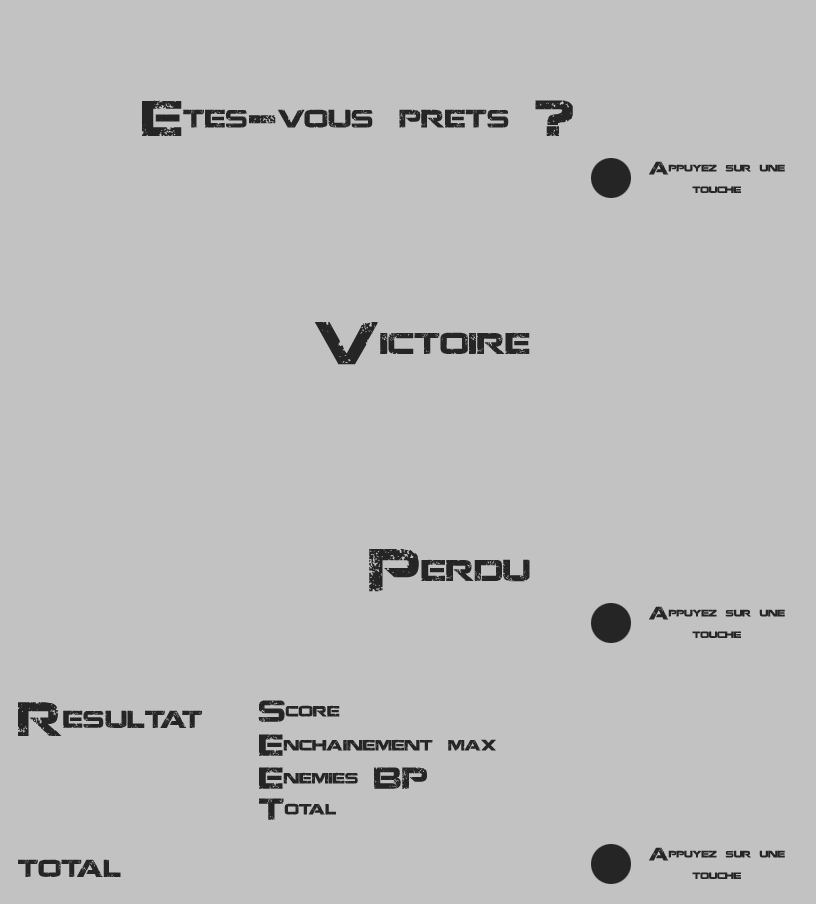
<style>
.page{position:relative;width:816px;height:904px;background:#c2c2c2}
.page>*{position:absolute;margin:0}
.t1{font:50px "JacintoSans";color:#252525}
.t2{font:18px "JacintoSans";color:#252525}
.t3{font:60px "JacintoSans";color:#252525}
.t4{font:48px "JacintoSans";color:#252525}
.t5{font:30px "JacintoSans";color:#252525}
</style>
<div class="page">
<p class="t1" style="left:142px;top:100px;width:431px;height:36px">Etes-vous prets ?</p>
<p class="t2" style="left:649px;top:161px;width:136px;height:32px;text-align:center">Appuyez sur une touche</p>
<p class="t3" style="left:315px;top:322px;width:215px;height:43px">Victoire</p>
<p class="t3" style="left:369px;top:549px;width:161px;height:43px">Perdu</p>
<p class="t2" style="left:649px;top:606px;width:136px;height:32px;text-align:center">Appuyez sur une touche</p>
<p class="t4" style="left:18px;top:702px;width:184px;height:34px">Resultat</p>
<p class="t5" style="left:258px;top:700px;width:82px;height:22px">Score</p>
<p class="t5" style="left:259px;top:734px;width:237px;height:22px">Enchainement max</p>
<p class="t5" style="left:259px;top:767px;width:168px;height:22px">Enemies BP</p>
<p class="t5" style="left:259px;top:798px;width:77px;height:22px">Total</p>
<p class="t2" style="left:649px;top:847px;width:136px;height:32px;text-align:center">Appuyez sur une touche</p>
<p class="t4" style="left:18px;top:859px;width:103px;height:18px">total</p>
</div>
